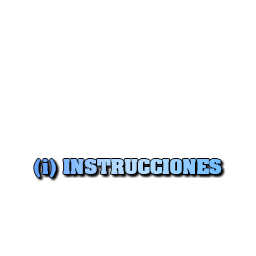
<style>
.page{position:relative;width:256px;height:256px;background:#ffffff}
.page>*{position:absolute;margin:0}
.t1{font:18px "AardvarkBold"}
</style>
<div class="page">
<p class="t1" style="left:34px;top:158px;width:188px;height:20px">(i) INSTRUCCIONES</p>
</div>
